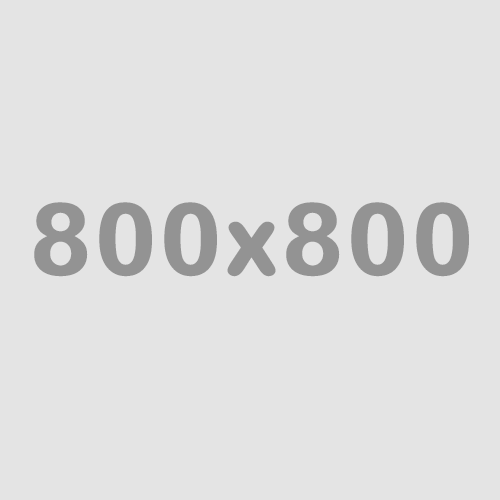
<style>
.page{position:relative;width:500px;height:500px;background:#e4e4e4}
.page>*{position:absolute;margin:0}
.t1{font:100.1px "DFLiYuan-XB-HK-BF";letter-spacing:0.05em;color:#939393}
</style>
<div class="page">
<p class="t1" style="left:34px;top:202px;width:435px;height:75px">800x800</p>
</div>
